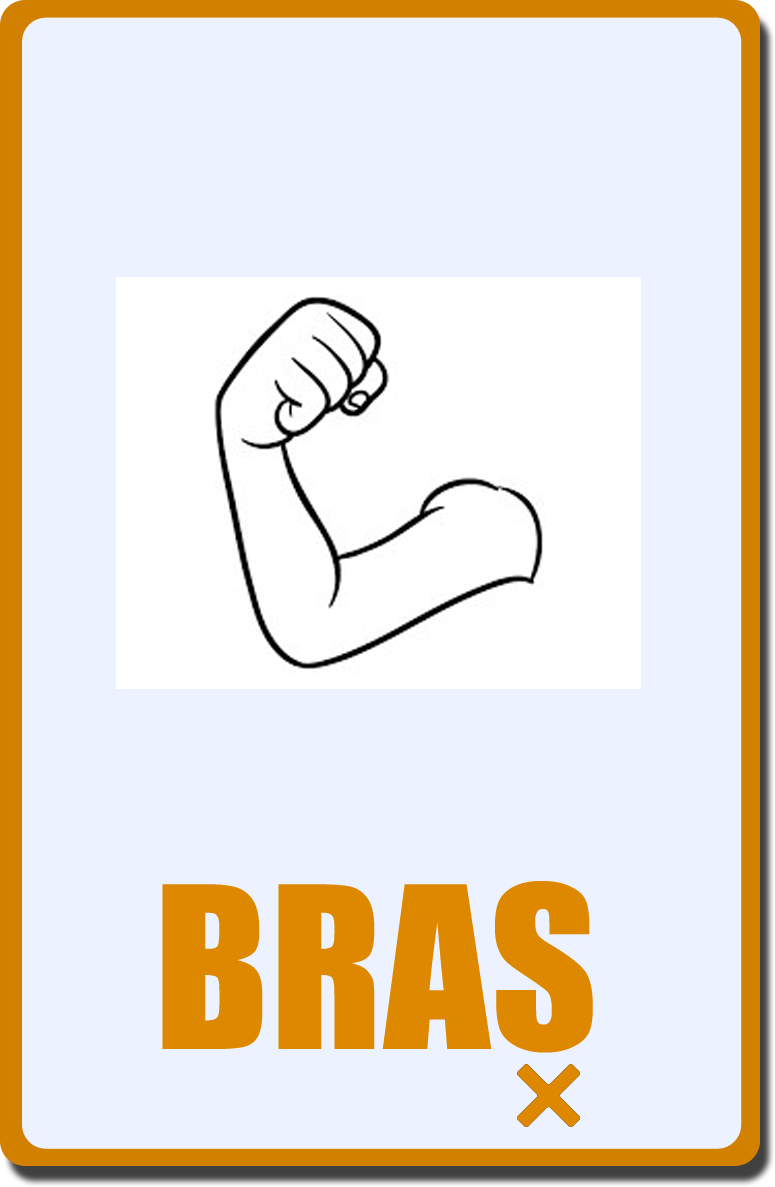
<style>
.page{position:relative;width:775px;height:1187px;background:#ecf2ff}
.page>*{position:absolute;margin:0}
.t1{font:208.3px "Impact";letter-spacing:0.005em;color:#de8800}
</style>
<div class="page">
<p class="t1" style="left:162px;top:881px;width:431px;height:172px">BRAS</p>
</div>
